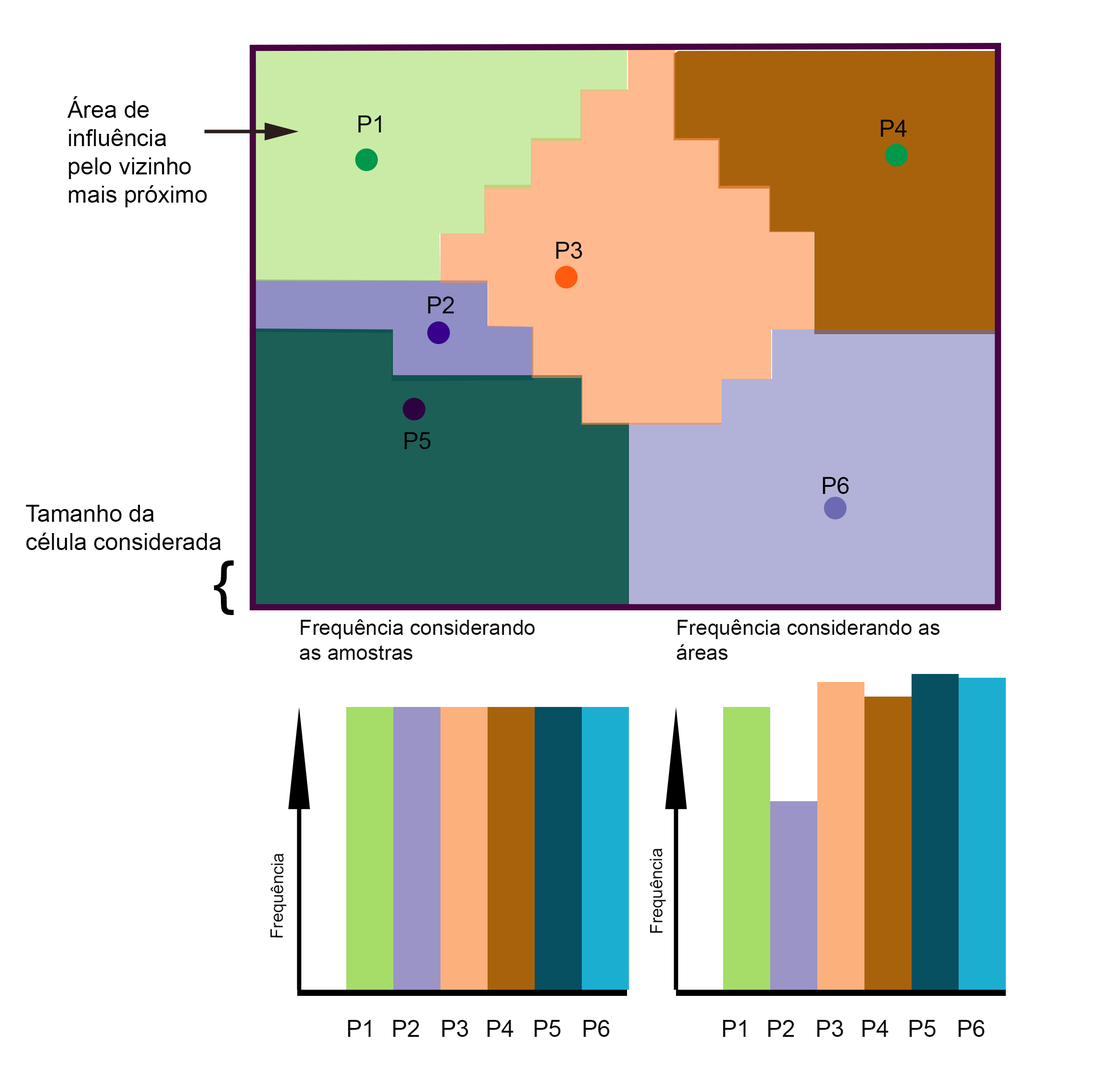
<style>
.page{position:relative;width:1100px;height:1084px;background:#ffffff}
.page>*{position:absolute;margin:0}
.t1{font:23.6px "ArialMT";color:#030303}
.t2{font:58.2px "ArialMT";color:#030303;scale:1.2 1}
.t3{font:20.9px "ArialMT";color:#0c0c0b}
.t4{font:17.2px "ArialMT";color:#0c0c0b}
.t5{font:23.6px "ArialMT";color:#0c0c0b}
</style>
<div class="page">
<p class="t1" style="left:67px;top:96px;width:140px;height:111px">Área de <br>influência <br>pelo vizinho <br>mais próximo</p>
<p class="t1" style="left:358px;top:115px;width:23px;height:17px">P1</p>
<p class="t1" style="left:881px;top:120px;width:26px;height:17px">P4</p>
<p class="t1" style="left:556px;top:242px;width:26px;height:17px">P3</p>
<p class="t1" style="left:428px;top:296px;width:26px;height:17px">P2</p>
<p class="t1" style="left:404px;top:432px;width:27px;height:17px">P5</p>
<p class="t1" style="left:823px;top:477px;width:26px;height:17px">P6</p>
<p class="t1" style="left:26px;top:505px;width:195px;height:45px">Tamanho da <br>célula considerada</p>
<p class="t2" style="left:214px;top:560px;width:20px;height:55px">{</p>
<p class="t3" style="left:300px;top:619px;width:235px;height:41px">Frequência considerando <br>as amostras</p>
<p class="t3" style="left:677px;top:619px;width:263px;height:41px">Frequência considerando as <br>áreas</p>
<p class="t4" style="left:270px;top:853px;width:16px;height:84px;rotate:-89deg">Frequência</p>
<p class="t4" style="left:650px;top:848px;width:16px;height:85px;rotate:-90deg">Frequência</p>
<p class="t5" style="left:348px;top:1020px;width:23px;height:17px">P1</p>
<p class="t5" style="left:393px;top:1020px;width:26px;height:17px">P2</p>
<p class="t5" style="left:442px;top:1020px;width:26px;height:17px">P3</p>
<p class="t5" style="left:487px;top:1020px;width:27px;height:17px">P4</p>
<p class="t5" style="left:534px;top:1020px;width:27px;height:17px">P5</p>
<p class="t5" style="left:583px;top:1020px;width:27px;height:17px">P6</p>
<p class="t5" style="left:723px;top:1020px;width:23px;height:17px">P1</p>
<p class="t5" style="left:768px;top:1020px;width:26px;height:17px">P2</p>
<p class="t5" style="left:817px;top:1020px;width:26px;height:17px">P3</p>
<p class="t5" style="left:862px;top:1020px;width:27px;height:17px">P4</p>
<p class="t5" style="left:909px;top:1020px;width:27px;height:17px">P5</p>
<p class="t5" style="left:958px;top:1020px;width:27px;height:17px">P6</p>
</div>
